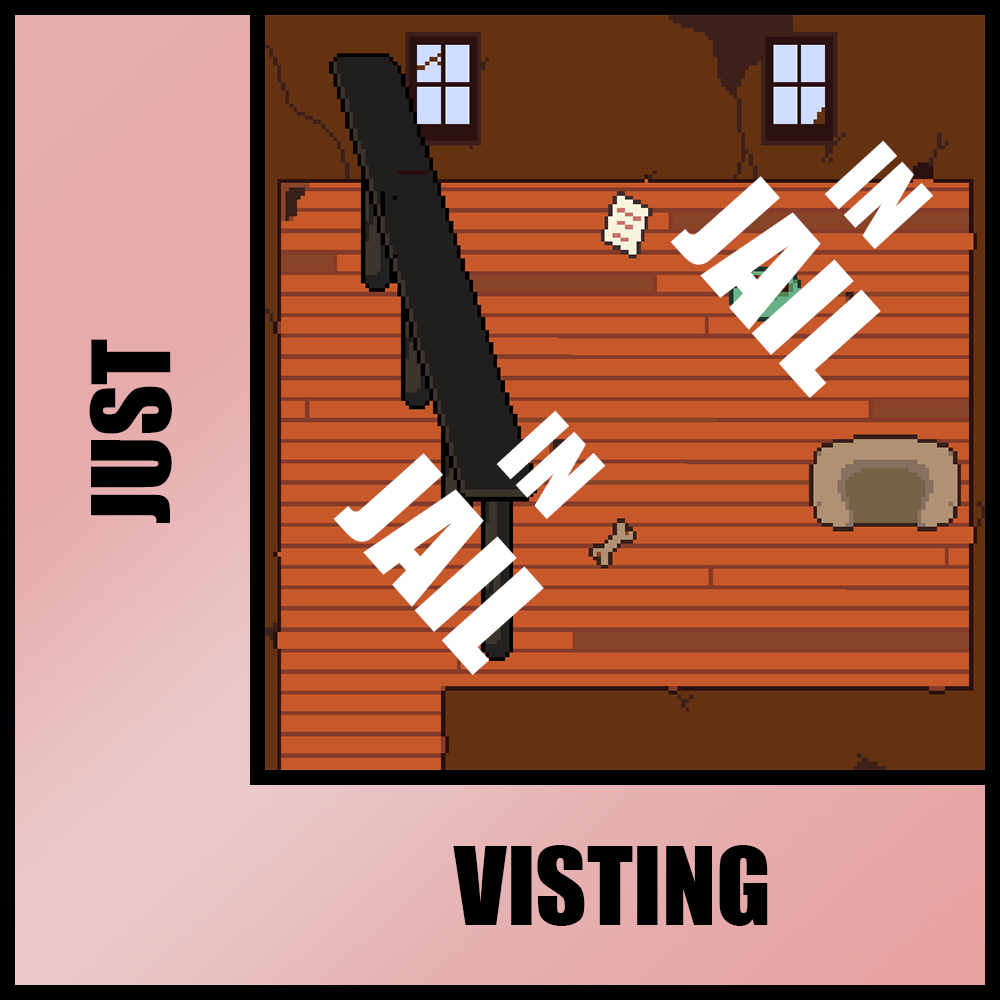
<style>
.page{position:relative;width:1000px;height:1000px}
.page>*{position:absolute;margin:0}
.t1{font:100px "Impact";color:#ffffff}
.t2{font:140px "Impact";color:#ffffff}
.t3{font:100px "Impact";color:#000000}
</style>
<div class="page">
<p class="t1" style="left:824px;top:140px;width:110px;height:109px;rotate:48deg">IN</p>
<p class="t2" style="left:670px;top:176px;width:211px;height:222px;rotate:48deg"><span class="t1">       <br>    </span>JAIL</p>
<p class="t3" style="left:89px;top:339px;width:83px;height:184px;rotate:-90deg">JUST</p>
<p class="t1" style="left:496px;top:410px;width:110px;height:109px;rotate:48deg">IN</p>
<p class="t2" style="left:333px;top:453px;width:211px;height:222px;rotate:48deg"><span class="t1">       <br>    </span>JAIL</p>
<p class="t3" style="left:453px;top:845px;width:315px;height:81px">VISTING</p>
</div>
